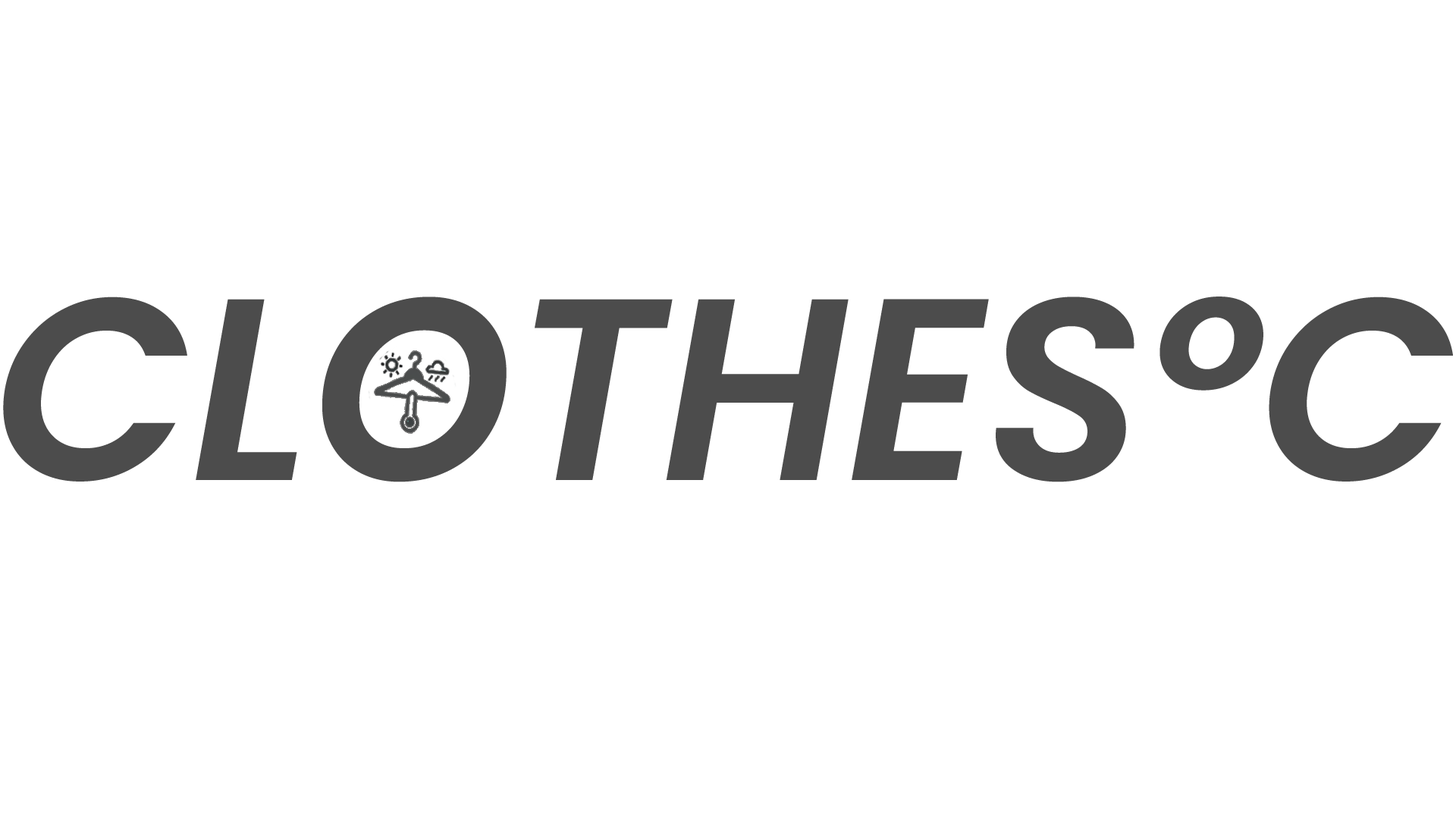
<style>
.page{position:relative;width:1456px;height:819px;background:#ffffff}
.page>*{position:absolute;margin:0}
.t1{font:258.4px "Poppins-SemiBoldItalic";color:#4c4c4c;text-transform:uppercase}
</style>
<div class="page">
<p class="t1" style="left:3px;top:297px;width:1450px;height:185px">clothesºC</p>
</div>
